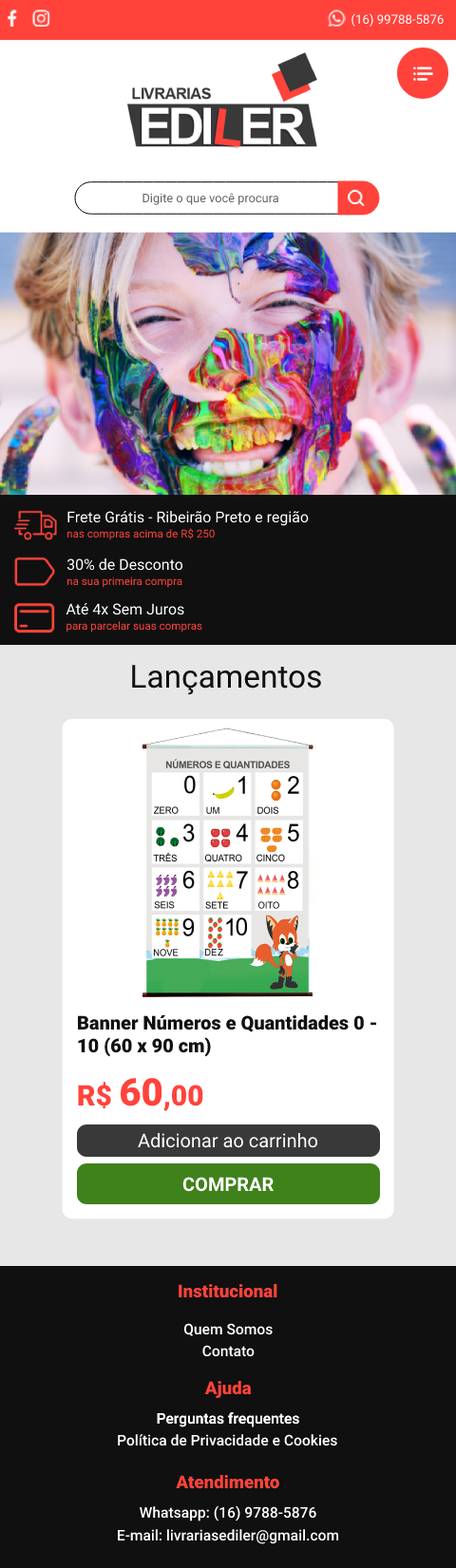
<style>
.page{position:relative;width:456px;height:1568px;background:#101010}
.page>*{position:absolute;margin:0}
.t1{font:12.6px "Roboto-Regular";color:#ffffff}
.t2{font:12.2px "Roboto-Regular";color:#666666}
.t3{font:15.2px "Roboto-Regular";color:#ffffff}
.t4{font:11px "Roboto-Regular";color:#ff433b}
.t5{font:31.8px "Roboto-Regular";color:#111111}
.t6{font:19px "Roboto-Black";color:#111111}
.t7{font:28.5px "Roboto-Black";color:#ff433b}
.t8{font:38px "Roboto-Black";color:#ff433b}
.t9{font:19px "Roboto-Regular";color:#ffffff}
.t10{font:19px "Roboto-Bold";color:#ffffff}
.t11{font:17.8px "Roboto-Black";color:#ff433b}
.t12{font:14.8px "Roboto-Medium";color:#ffffff}
</style>
<div class="page">
<p class="t1" style="left:351px;top:13px;width:93px;height:14px">(16) 99788-5876</p>
<p class="t2" style="left:142px;top:193px;width:136px;height:12px">Digite o que você procura</p>
<p class="t3" style="left:67px;top:511px;width:242px;height:15px">Frete Grátis - Ribeirão Preto e região</p>
<p class="t4" style="left:67px;top:528px;width:148px;height:12px">nas compras acima de R$ 250</p>
<p class="t3" style="left:67px;top:558px;width:115px;height:13px">30% de Desconto</p>
<p class="t4" style="left:67px;top:576px;width:115px;height:12px">na sua primeira compra</p>
<p class="t3" style="left:66px;top:603px;width:118px;height:12px">Até 4x Sem Juros</p>
<p class="t4" style="left:66px;top:621px;width:136px;height:12px">para parcelar suas compras</p>
<p class="t5" style="left:132px;top:665px;width:189px;height:30px">Lançamentos</p>
<p class="t6" style="left:78px;top:1015px;width:298px;height:42px">Banner Números e Quantidades 0 - 10 (60 x 90 cm)</p>
<p class="t7" style="left:78px;top:1078px;width:125px;height:33px">R$ <span class="t8">60</span>,00</p>
<p class="t9" style="left:138px;top:1133px;width:180px;height:15px">Adicionar ao carrinho</p>
<p class="t10" style="left:182px;top:1177px;width:92px;height:15px">COMPRAR</p>
<p class="t11" style="left:179px;top:1283px;width:98px;height:15px">Institucional</p>
<p class="t12" style="left:184px;top:1323px;width:89px;height:13px">Quem Somos</p>
<p class="t12" style="left:202px;top:1345px;width:53px;height:12px">Contato</p>
<p class="t11" style="left:204px;top:1381px;width:48px;height:17px">Ajuda</p>
<p class="t12" style="left:157px;top:1412px;width:142px;height:15px">Perguntas frequentes</p>
<p class="t12" style="left:157px;top:1412px;width:142px;height:15px">Perguntas frequentes</p>
<p class="t12" style="left:118px;top:1434px;width:219px;height:12px">Política de Privacidade e Cookies</p>
<p class="t11" style="left:176px;top:1475px;width:103px;height:14px">Atendimento</p>
<p class="t12" style="left:140px;top:1505px;width:176px;height:16px">Whatsapp: (16) 9788-5876</p>
<p class="t12" style="left:118px;top:1529px;width:220px;height:15px">E-mail: livrariasediler@gmail.com</p>
</div>
